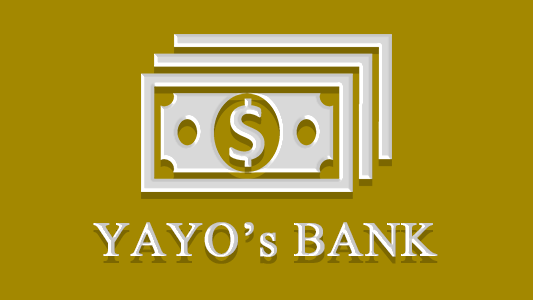
<style>
.page{position:relative;width:533px;height:300px;background:#a38800}
.page>*{position:absolute;margin:0}
.t1{font:72px "Microsoft-Himalaya";font-weight:bold}
</style>
<div class="page">
<p class="t1" style="left:93px;top:222px;width:345px;height:35px">YAYO’s BANK</p>
</div>
